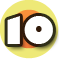
<style>
.page{position:relative;width:59px;height:59px;background:#ffffff}
.page>*{position:absolute;margin:0}
.t1{font:37.4px "GillSans-UltraBold";letter-spacing:-0.2em;color:#ffffff}
</style>
<div class="page">
<p class="t1" style="left:7px;top:16px;width:46px;height:28px">10</p>
</div>
